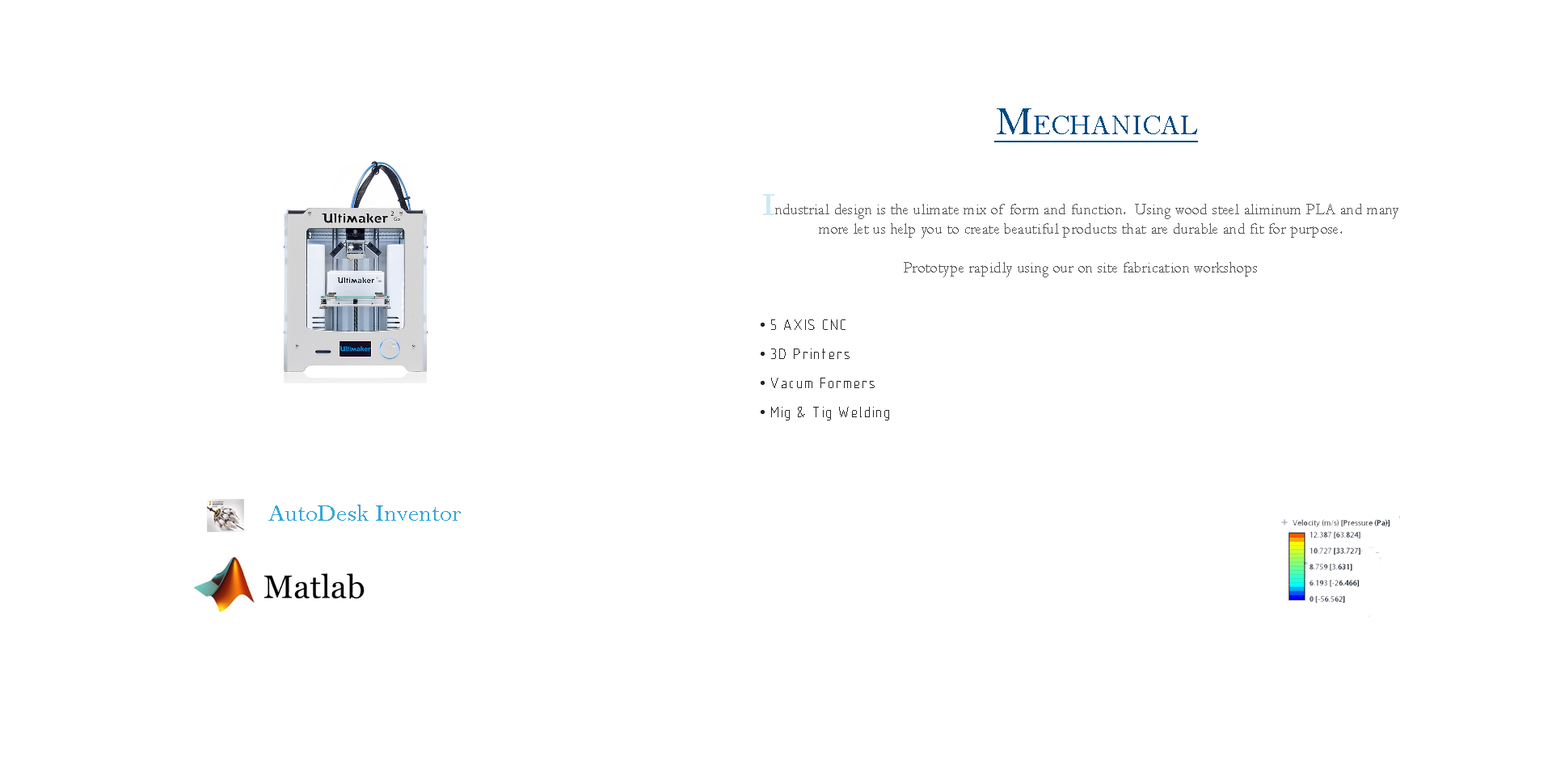
<style>
.page{position:relative;width:1552px;height:769px;background:#ffffff}
.page>*{position:absolute;margin:0}
.t1{font:40.4px "BellMT";color:#004a83;font-variant:small-caps;text-decoration:underline}
.t2{font:16.2px "Centaur";letter-spacing:0.02em;color:#585959}
.t3{font:29.1px "Castellar";letter-spacing:0.02em;color:#cce9f5;font-weight:bold}
.t4{font:16.2px/29.1px "GENISO";color:#272727}
.t5{font:16.2px/29.1px "TimesNewRomanPSMT";color:#272727}
.t6{font:24.2px "BellMT";color:#34a7d7}
</style>
<div class="page">
<p class="t1" style="left:994px;top:108px;width:204px;height:34px">Mechanical</p>
<p class="t2" style="left:763px;top:194px;width:635px;height:83px;text-align:center"><span class="t3">I</span>ndustrial design is the ulimate mix of form and function.  Using wood steel aliminum PLA and many more let us help you to create beautiful products that are durable and fit for purpose.<br><br>Prototype rapidly using our on site fabrication workshops</p>
<p class="t4" style="left:760px;top:319px;width:129px;height:101px"><span class="t5">• </span>5 AXIS CNC<br><span class="t5">• </span>3D Printers<br><span class="t5">• </span>Vacum Formers<br><span class="t5">• </span>Mig &amp; Tig Welding</p>
<p class="t6" style="left:268px;top:504px;width:193px;height:16px">AutoDesk Inventor</p>
</div>
